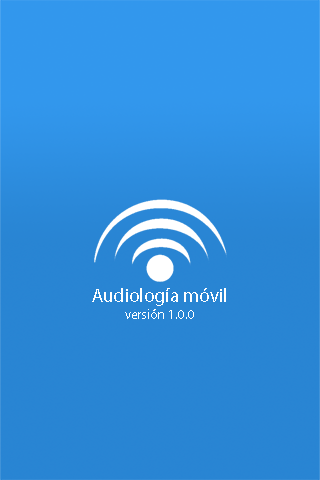
<style>
.page{position:relative;width:320px;height:480px;background:#2985d3}
.page>*{position:absolute;margin:0}
.t1{font:19.4px "MyriadPro-Regular";color:#ffffff}
.t2{font:13.9px "MyriadPro-Regular";color:#ffffff}
</style>
<div class="page">
<p class="t1" style="left:92px;top:288px;width:134px;height:31px;text-align:center">Audiología móvil<br><span class="t2">versión 1.0.0</span></p>
</div>
